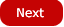
<style>
.page{position:relative;width:64px;height:27px;background:#c50303}
.page>*{position:absolute;margin:0}
.t1{font:12px "Verdana";color:#ffffff}
</style>
<div class="page">
<p class="t1" style="left:17px;top:8px;width:27px;height:10px">Next</p>
</div>
